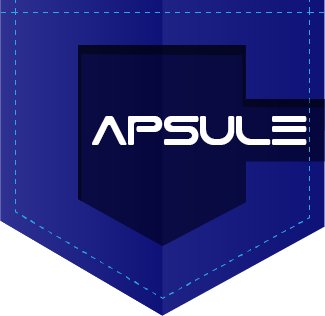
<style>
.page{position:relative;width:325px;height:316px}
.page>*{position:absolute;margin:0}
.t1{font:41.7px "GtekTechnology";color:#fefefe}
</style>
<div class="page">
<p class="t1" style="left:92px;top:116px;width:215px;height:29px">apsule</p>
</div>
